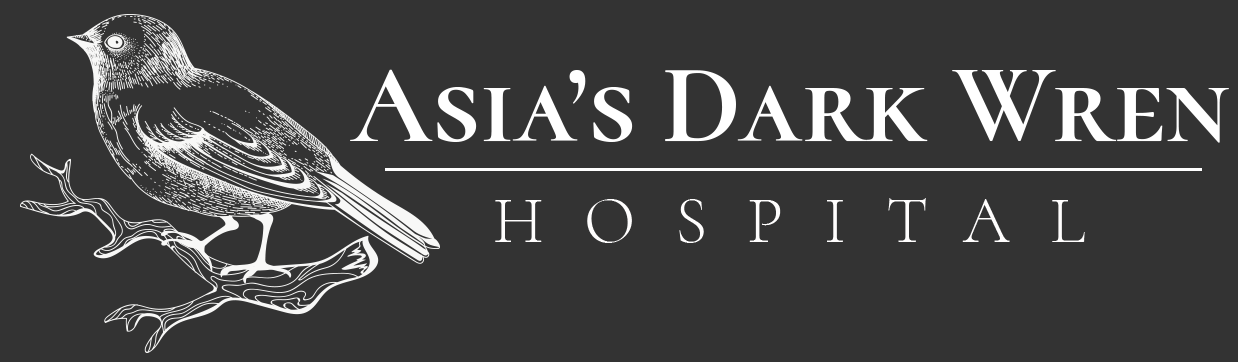
<style>
.page{position:relative;width:1238px;height:362px;background:#333333}
.page>*{position:absolute;margin:0}
.t1{font:112.9px "CormorantSC-Bold";color:#ffffff}
.t2{font:66.8px "CormorantSC-Light";letter-spacing:0.6em;color:#fffefe}
</style>
<div class="page">
<p class="t1" style="left:350px;top:69px;width:879px;height:74px">Asia’s Dark Wren</p>
<p class="t2" style="left:495px;top:198px;width:590px;height:45px">HOSPITAL</p>
</div>
